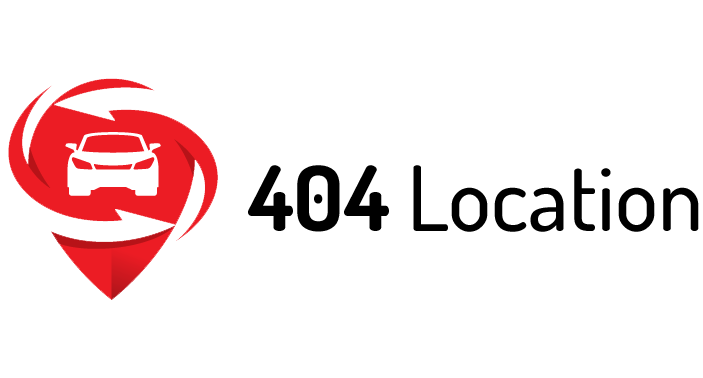
<style>
.page{position:relative;width:703px;height:378px;background:#ffffff}
.page>*{position:absolute;margin:0}
.t1{font:90px "Dosis-Medium";color:#000000}
.t2{font:90px "Dosis-Bold";color:#000000}
</style>
<div class="page">
<p class="t1" style="left:248px;top:165px;width:451px;height:67px"><span class="t2">404 </span>Location</p>
</div>
